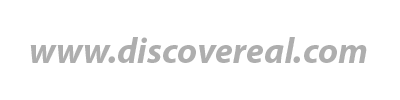
<style>
.page{position:relative;width:400px;height:100px;background:#ffffff}
.page>*{position:absolute;margin:0}
.t1{font:36px "MyriadPro-BoldIt";color:#aeaeae}
</style>
<div class="page">
<p class="t1" style="left:30px;top:37px;width:337px;height:26px">www.discovereal.com</p>
</div>
